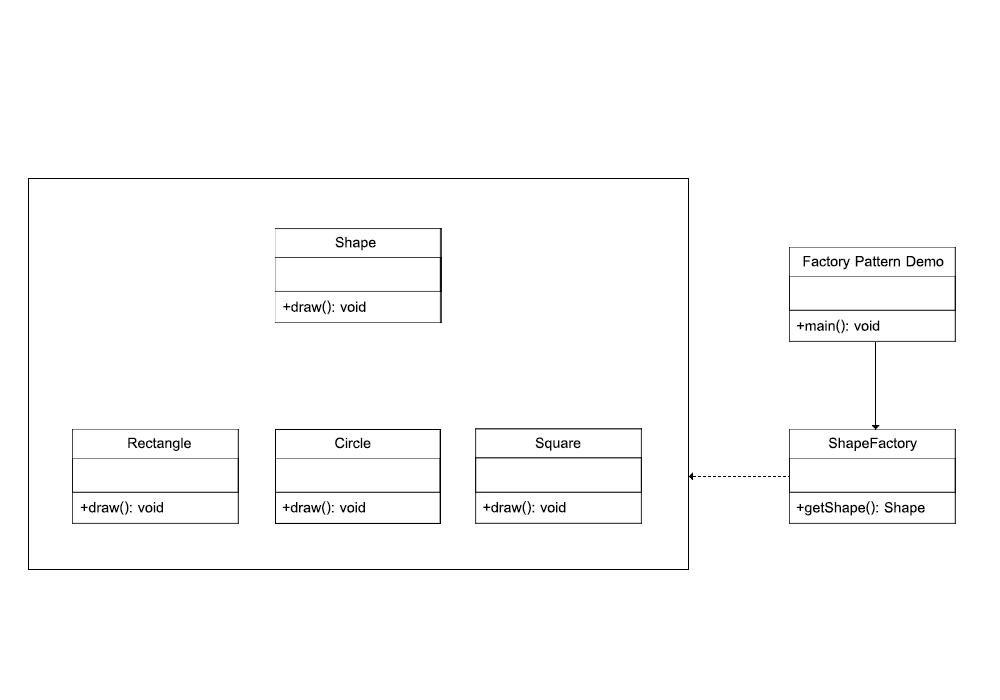
<style>
.page{position:relative;width:1000px;height:700px;background:#ffffff}
.page>*{position:absolute;margin:0}
.t1{font:21.8px "CordiaNew-Bold";color:#000000}
</style>
<div class="page">
<p class="t1" style="left:335px;top:236px;width:41px;height:15px">Shape</p>
<p class="t1" style="left:803px;top:256px;width:141px;height:14px">Factory Pattern Demo</p>
<p class="t1" style="left:283px;top:300px;width:83px;height:15px">+draw(): void</p>
<p class="t1" style="left:797px;top:319px;width:83px;height:15px">+main(): void</p>
<p class="t1" style="left:128px;top:437px;width:63px;height:14px">Rectangle</p>
<p class="t1" style="left:335px;top:437px;width:36px;height:12px">Circle</p>
<p class="t1" style="left:535px;top:437px;width:46px;height:14px">Square</p>
<p class="t1" style="left:828px;top:437px;width:89px;height:14px">ShapeFactory</p>
<p class="t1" style="left:80px;top:501px;width:83px;height:14px">+draw(): void</p>
<p class="t1" style="left:282px;top:501px;width:83px;height:14px">+draw(): void</p>
<p class="t1" style="left:483px;top:501px;width:83px;height:14px">+draw(): void</p>
<p class="t1" style="left:796px;top:501px;width:129px;height:15px">+getShape(): Shape</p>
</div>
